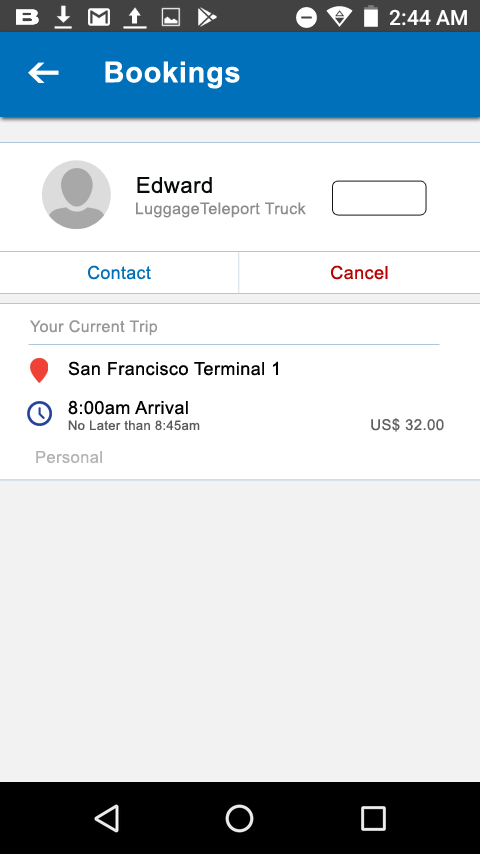
<style>
.page{position:relative;width:480px;height:854px;background:#f2f2f2}
.page>*{position:absolute;margin:0}
.t1{font:29px "Arial-BoldMT";letter-spacing:0.025em;color:#ffffff}
.t2{font:22px "ArialMT";letter-spacing:0.025em;color:#060a0a}
.t3{font:16px "ArialMT";letter-spacing:0.025em;color:#8b8d8d}
.t4{font:18px "ArialMT";letter-spacing:0.025em;color:#0070ba}
.t5{font:18px "ArialMT";letter-spacing:0.025em;color:#ba0000}
.t6{font:16px "ArialMT";letter-spacing:0.025em;color:#979797}
.t7{font:18px "ArialMT";letter-spacing:0.025em;color:#000000}
.t8{font:13px/16px "ArialMT";letter-spacing:0.025em;color:#5a5a5a}
.t9{font:18px/45px "ArialMT";letter-spacing:0.025em;color:#000000}
.t10{font:15px "ArialMT";letter-spacing:0.025em;color:#606060}
.t11{font:16.5px "ArialMT";letter-spacing:0.025em;color:#b5b3b3}
</style>
<div class="page">
<p class="t1" style="left:105px;top:61px;width:135px;height:28px">Bookings</p>
<p class="t2" style="left:137px;top:177px;width:75px;height:17px">Edward</p>
<p class="t3" style="left:136px;top:202px;width:170px;height:16px">LuggageTeleport Truck</p>
<p class="t4" style="left:88px;top:265px;width:63px;height:15px">Contact</p>
<p class="t5" style="left:331px;top:265px;width:57px;height:15px">Cancel</p>
<p class="t6" style="left:30px;top:320px;width:128px;height:16px">Your Current Trip</p>
<p class="t7" style="left:68px;top:361px;width:210px;height:15px">San Francisco Terminal 1</p>
<p class="t8" style="left:68px;top:400px;width:132px;height:31px"><span class="t9">8:00am Arrival<br></span>No Later than 8:45am</p>
<p class="t10" style="left:371px;top:418px;width:73px;height:14px">US$ 32.00</p>
<p class="t11" style="left:36px;top:451px;width:66px;height:13px">Personal</p>
</div>
